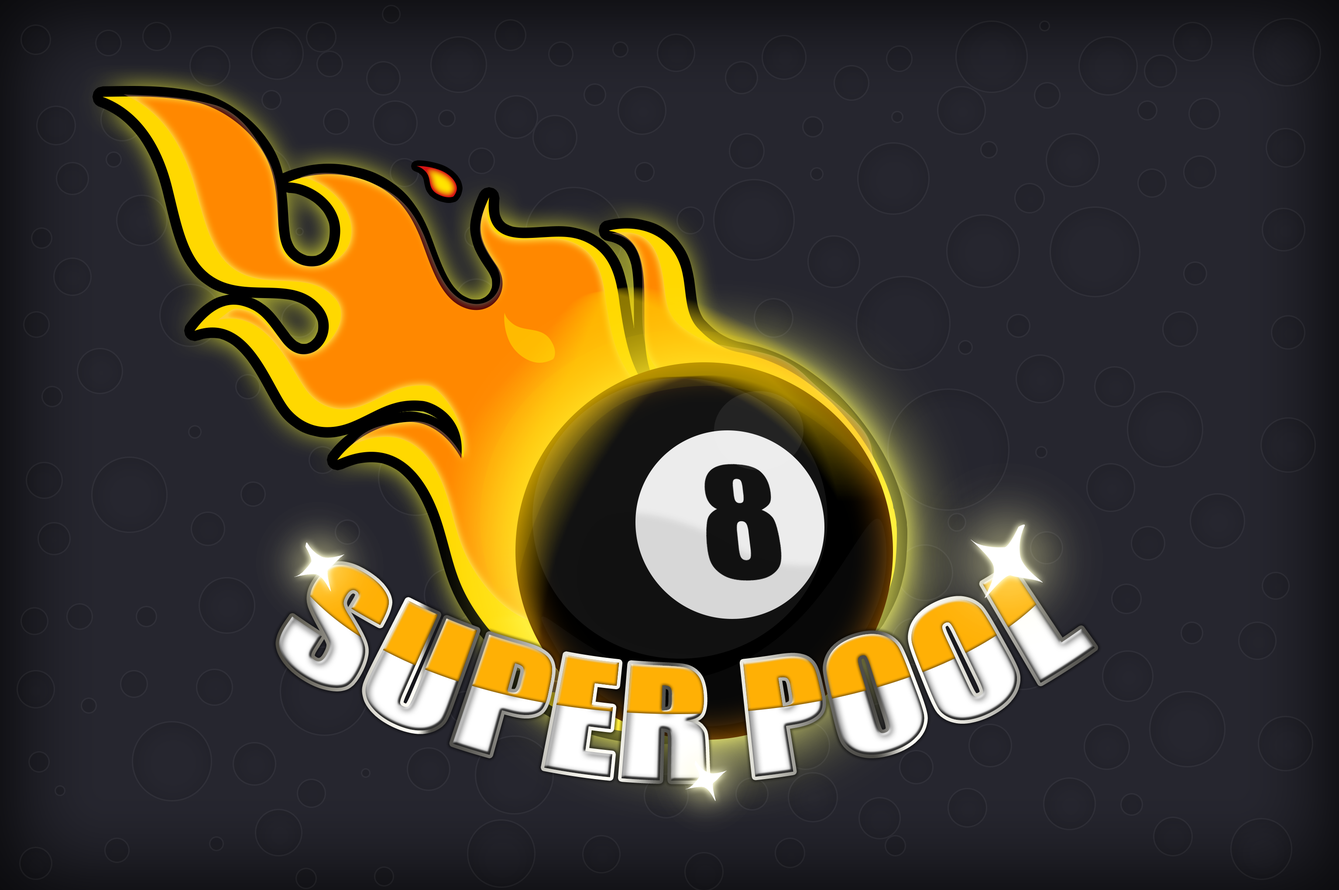
<style>
.page{position:relative;width:1339px;height:890px;background:#26262f}
.page>*{position:absolute;margin:0}
.t1{font:145.5px "Impact"}
</style>
<div class="page">
<p class="t1" style="left:279px;top:565px;width:816px;height:216px">SUPER POOL</p>
</div>
